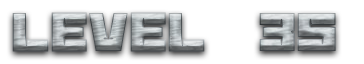
<style>
.page{position:relative;width:364px;height:64px;background:#ffffff}
.page>*{position:absolute;margin:0}
.t1{font:60px "BananaBrick"}
</style>
<div class="page">
<p class="t1" style="left:12px;top:12px;width:324px;height:40px">Level  35</p>
</div>
